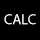
<style>
.page{position:relative;width:40px;height:40px;background:#000000}
.page>*{position:absolute;margin:0}
.t1{font:14.6px "MyriadPro-Regular";color:#ffffff}
</style>
<div class="page">
<p class="t1" style="left:4px;top:14px;width:32px;height:11px">CALC</p>
</div>
